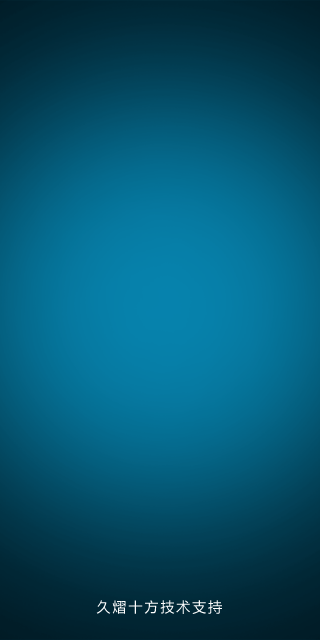
<style>
.page{position:relative;width:320px;height:640px}
.page>*{position:absolute;margin:0}
.t1{font:14px "MicrosoftYaHei";letter-spacing:0.14em;color:#fefefe}
</style>
<div class="page">
<p class="t1" style="left:96px;top:600px;width:126px;height:14px">久熠十方技术支持</p>
</div>
